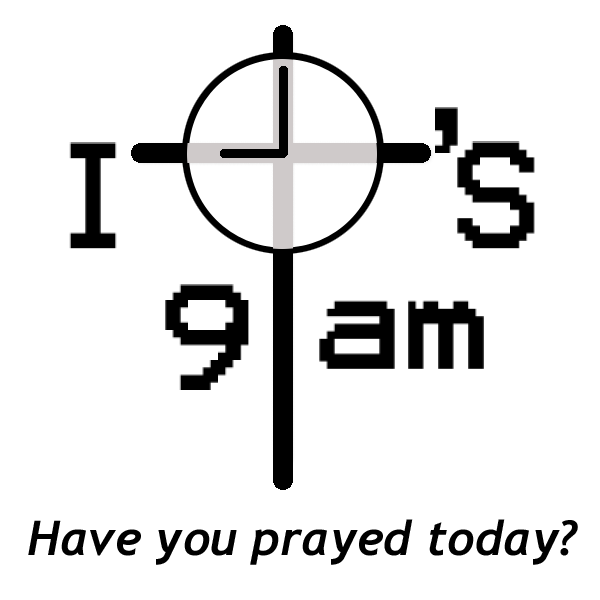
<style>
.page{position:relative;width:600px;height:600px;background:#ffffff}
.page>*{position:absolute;margin:0}
.t1{font:120px "Terminal";color:#000000}
.t2{font:48px "Trebuchet-BoldItalic";color:#000000}
</style>
<div class="page">
<p class="t1" style="left:435px;top:107px;width:23px;height:46px">‘</p>
<p class="t1" style="left:69px;top:142px;width:48px;height:107px">I</p>
<p class="t1" style="left:457px;top:141px;width:78px;height:108px">S</p>
<p class="t1" style="left:165px;top:284px;width:84px;height:106px">9</p>
<p class="t1" style="left:319px;top:300px;width:165px;height:69px">am</p>
<p class="t2" style="left:28px;top:519px;width:550px;height:46px">Have you prayed today?</p>
</div>
